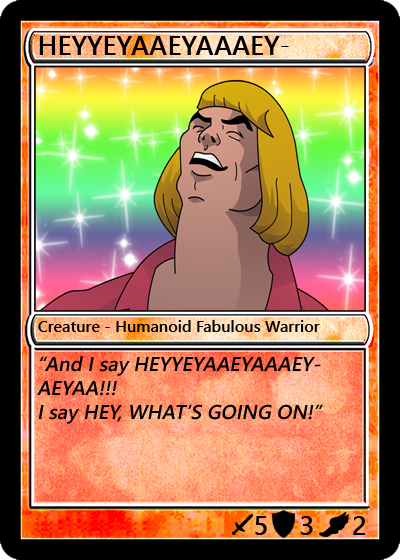
<style>
.page{position:relative;width:400px;height:560px}
.page>*{position:absolute;margin:0}
.t1{font:27px "YuGothicUI-Semibold";color:#000000}
.t2{font:16px "YuGothicUI-Semibold";color:#000000}
.t3{font:20px "YuGothicUI-Semibold";color:#000000;font-style:italic}
</style>
<div class="page">
<p class="t1" style="left:39px;top:36px;width:250px;height:19px">HEYYEYAAEYAAAEYAEYAA</p>
<p class="t2" style="left:38px;top:320px;width:282px;height:12px">Creature - Humanoid Fabulous Warrior</p>
<p class="t3" style="left:37px;top:356px;width:286px;height:68px">“And I say HEYYEYAAEYAAAEYAEYAA!!!<br>I say HEY, WHAT’S GOING ON!”</p>
<p class="t1" style="left:255px;top:516px;width:12px;height:19px">5</p>
<p class="t1" style="left:301px;top:516px;width:12px;height:19px">3</p>
<p class="t1" style="left:353px;top:516px;width:13px;height:19px">2</p>
</div>
